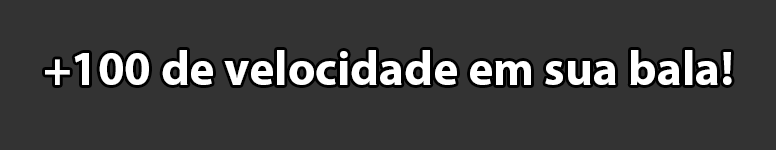
<style>
.page{position:relative;width:776px;height:150px;background:#333333}
.page>*{position:absolute;margin:0}
.t1{font:48px "MyriadPro-Bold";color:#ffffff}
.t2{font:48px "MyriadPro-Bold";color:#000000}
</style>
<div class="page">
<p class="t1" style="left:45px;top:50px;width:687px;height:35px"><span class="t2"><br><br><br></span>+100 de velocidade em sua bala!</p>
</div>
